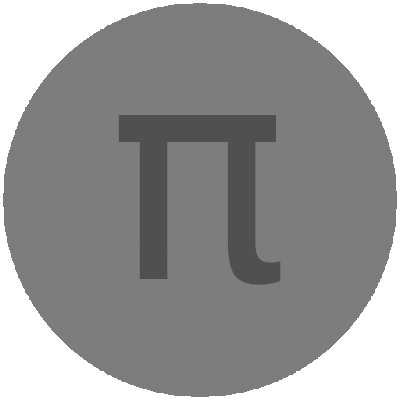
<style>
.page{position:relative;width:400px;height:400px;background:#7d7d7d}
.page>*{position:absolute;margin:0}
.t1{font:300px "DejaVuSans";color:#505050}
</style>
<div class="page">
<p class="t1" style="left:118px;top:114px;width:163px;height:171px">π</p>
</div>
